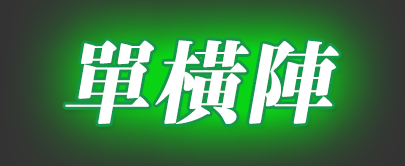
<style>
.page{position:relative;width:405px;height:166px}
.page>*{position:absolute;margin:0}
.t1{font:89px "KochoStd-Heavy";letter-spacing:0.025em;color:#ffffff;font-weight:bold;font-style:italic}
</style>
<div class="page">
<p class="t1" style="left:65px;top:40px;width:274px;height:84px">單橫陣</p>
</div>
